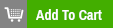
<style>
.page{position:relative;width:113px;height:28px;background:#43ae00}
.page>*{position:absolute;margin:0}
.t1{font:14.5px "ArchivoNarrow-Bold";color:#ffffff}
</style>
<div class="page">
<p class="t1" style="left:36px;top:9px;width:66px;height:11px">Add To Cart</p>
</div>
